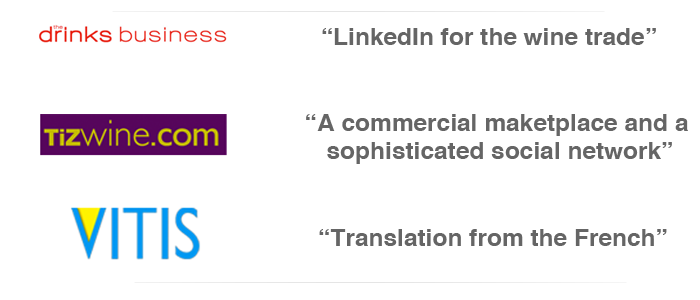
<style>
.page{position:relative;width:700px;height:300px;background:#ffffff}
.page>*{position:absolute;margin:0}
.t1{font:23.1px "Helvetica-Bold";color:#656565;scale:1.06 1}
</style>
<div class="page">
<p class="t1" style="left:322px;top:28px;width:334px;height:17px">“LinkedIn for the wine trade”</p>
<p class="t1" style="left:306px;top:114px;width:382px;height:50px;text-align:center">“A commercial maketplace and a <br>sophisticated social network”</p>
<p class="t1" style="left:319px;top:229px;width:348px;height:17px">“Translation from the French”</p>
</div>
